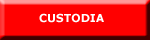
<style>
.page{position:relative;width:150px;height:40px;background:#ff0000}
.page>*{position:absolute;margin:0}
.t1{font:11px "Verdana-Bold";color:#ffffff}
</style>
<div class="page">
<p class="t1" style="left:39px;top:13px;width:65px;height:10px">CUSTODIA</p>
</div>
